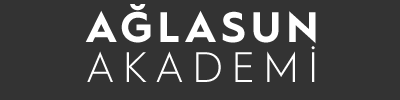
<style>
.page{position:relative;width:400px;height:100px;background:#333333}
.page>*{position:absolute;margin:0}
.t1{font:42.7px/40px "HurmeGeometricSans1-Bold";letter-spacing:0.12em;color:#ffffff}
.t2{font:42.7px/40px "HurmeGeometricSans1-Light";letter-spacing:0.2em;color:#ffffff}
</style>
<div class="page">
<p class="t1" style="left:85px;top:4px;width:231px;height:78px;text-align:center">AĞLASUN<br><span class="t2">AKADEMİ</span></p>
</div>
